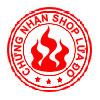
<style>
.page{position:relative;width:100px;height:100px;background:#ffffff}
.page>*{position:absolute;margin:0}
.t1{font:9.9px "Arial-BoldMT";color:#fb0000}
</style>
<div class="page">
<p class="t1" style="left:12px;top:14px;width:75px;height:64px;rotate:38deg">CHỨNG NHẬN SHOP LỬA ĐỎ</p>
</div>
